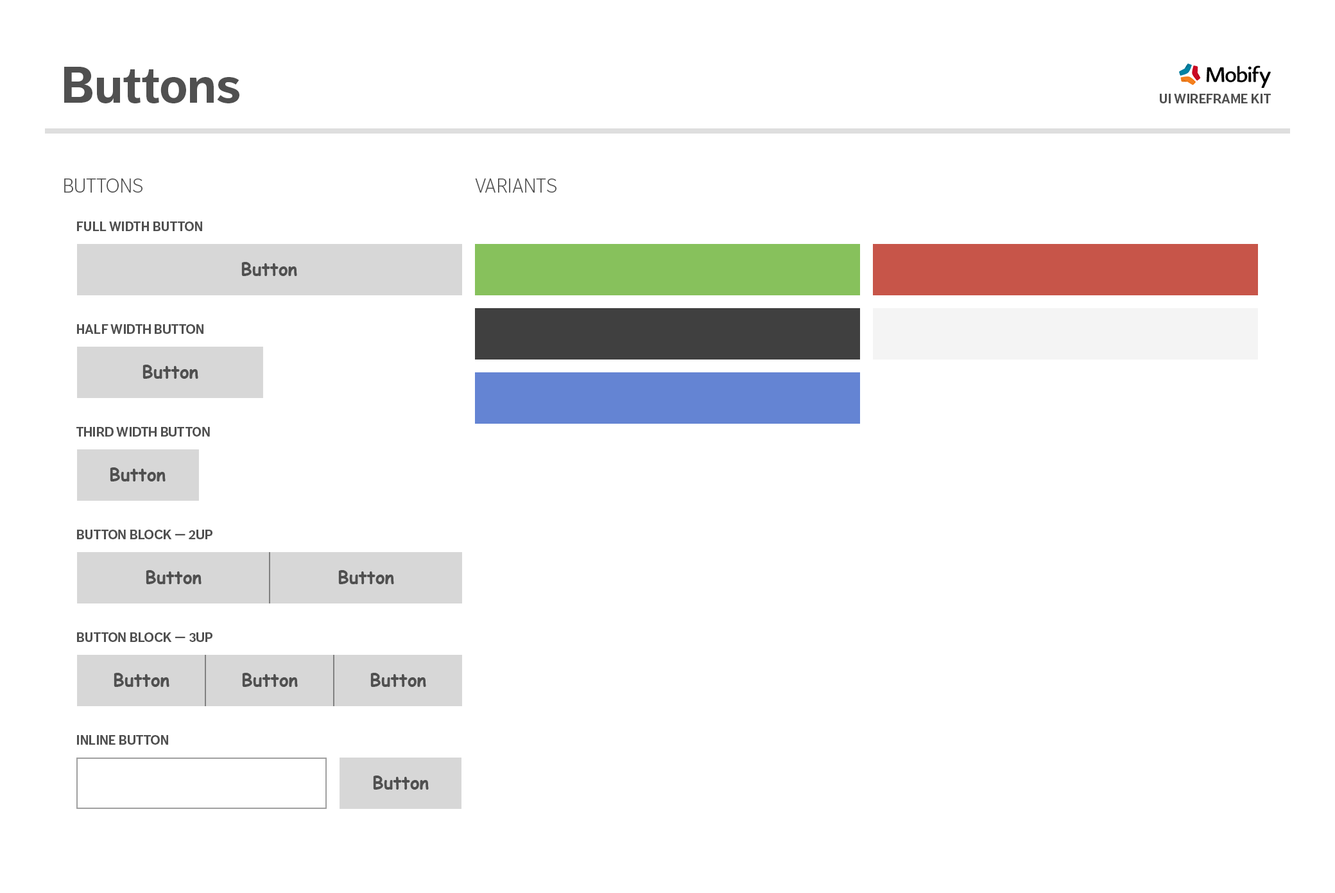
<style>
.page{position:relative;width:1335px;height:893px;background:#ffffff}
.page>*{position:absolute;margin:0}
.t1{font:51.4px "DagnyOT-Bold";color:#505050}
.t2{font:12.8px "DagnyOT-Bold";color:#505050;text-transform:uppercase}
.t3{font:19.3px "DagnyOT-Light";color:#505050;text-transform:uppercase}
</style>
<div class="page">
<p class="t1" style="left:64px;top:67px;width:175px;height:36px">Buttons</p>
<p class="t2" style="left:1160px;top:94px;width:111px;height:9px">UI Wireframe Kit</p>
<p class="t3" style="left:64px;top:178px;width:79px;height:15px">Buttons</p>
<p class="t3" style="left:475px;top:178px;width:82px;height:15px">Variants</p>
<p class="t2" style="left:77px;top:221px;width:125px;height:10px">Full Width Button</p>
<p class="t2" style="left:77px;top:324px;width:127px;height:10px">Half Width Button</p>
<p class="t2" style="left:76px;top:427px;width:134px;height:10px">Third Width Button</p>
<p class="t2" style="left:77px;top:530px;width:135px;height:9px">Button Block — 2UP</p>
<p class="t2" style="left:77px;top:632px;width:135px;height:10px">Button Block — 3UP</p>
<p class="t2" style="left:77px;top:735px;width:91px;height:10px">Inline Button</p>
</div>
